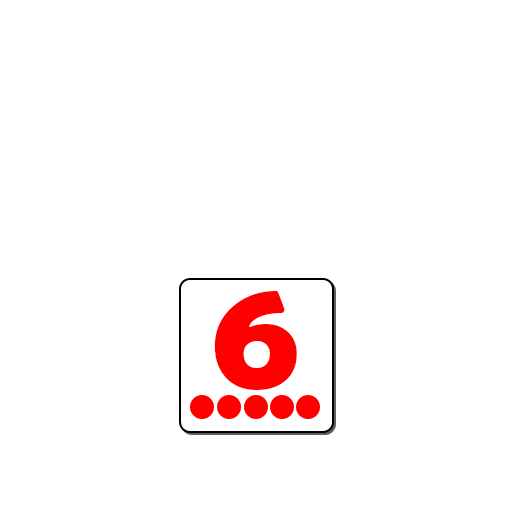
<style>
.page{position:relative;width:512px;height:512px;background:#ffffff}
.page>*{position:absolute;margin:0}
.t1{font:160px "BerlinSansFBDemi-Bold";color:#ff0000}
</style>
<div class="page">
<p class="t1" style="left:214px;top:291px;width:83px;height:99px">6</p>
</div>
